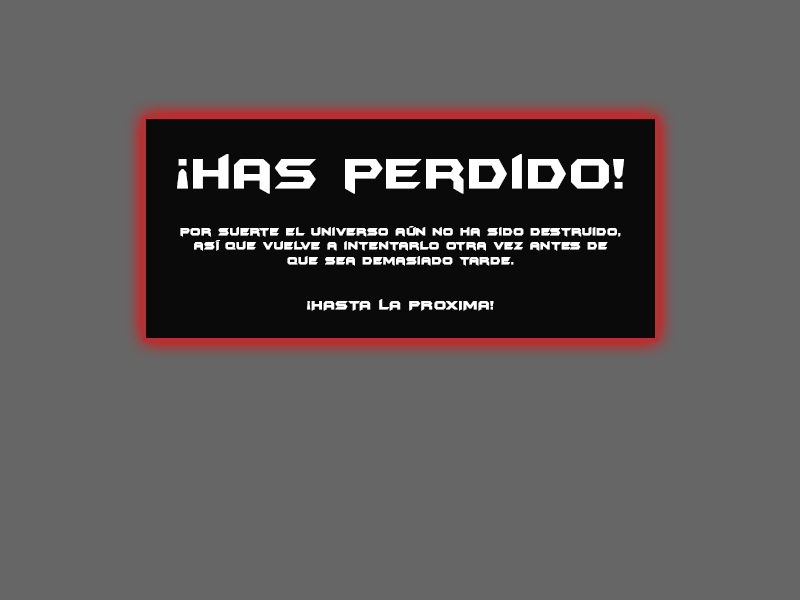
<style>
.page{position:relative;width:800px;height:600px;background:#666666}
.page>*{position:absolute;margin:0}
.t1{font:48px "BatmanForeverAlternate";color:#ffffff;font-weight:bold}
.t2{font:12px "BatmanForeverAlternate";color:#ffffff;font-weight:bold}
.t3{font:14px "BatmanForeverAlternate";color:#ffffff;font-weight:bold}
</style>
<div class="page">
<p class="t1" style="left:177px;top:154px;width:447px;height:40px">¡has perdido!</p>
<p class="t2" style="left:180px;top:226px;width:441px;height:40px;text-align:center">por suerte el universo aún no ha sido destruido,<br>así que vuelve a intentarlo otra vez antes de<br>que sea demasiado tarde.</p>
<p class="t3" style="left:307px;top:299px;width:187px;height:12px">¡HASTA LA PRóXIMA!</p>
</div>
